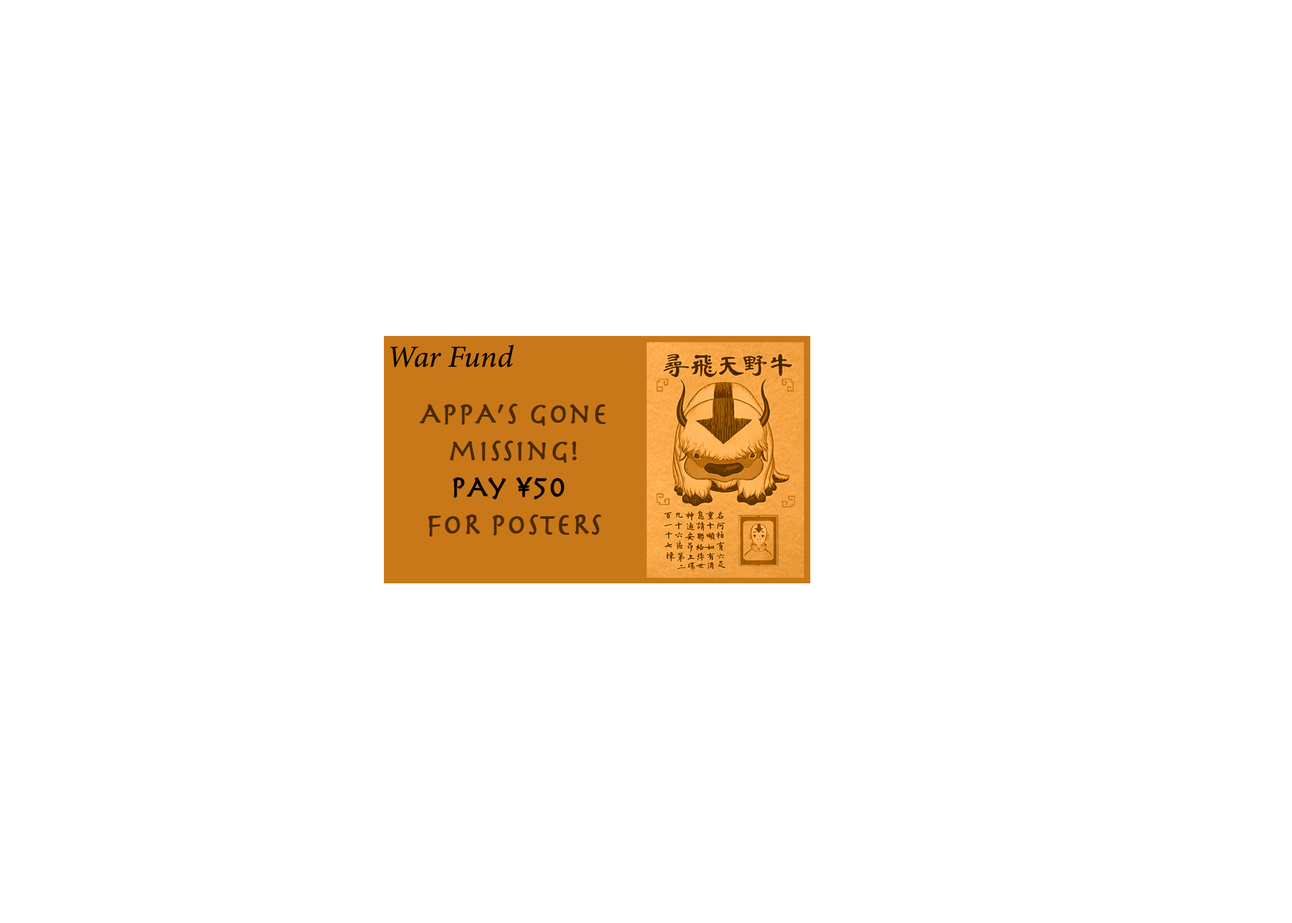
<style>
.page{position:relative;width:1292px;height:923px;background:#ffffff}
.page>*{position:absolute;margin:0}
.t1{font:30.8px "MinionConceptItalic-MediumItalic";color:#000000;font-weight:bold}
.t2{font:30.8px "Herculanum";color:#4d310e;font-weight:bold}
.t3{font:30.8px "Herculanum";color:#000000;font-weight:bold}
</style>
<div class="page">
<p class="t1" style="left:390px;top:345px;width:124px;height:22px">War Fund</p>
<p class="t2" style="left:420px;top:404px;width:186px;height:133px;text-align:center">AppA’s gone<br>missing!<br> <br>foR posteRs</p>
<p class="t3" style="left:453px;top:477px;width:112px;height:23px"><span class="t2"> <br> <br></span>pAy ¥50</p>
</div>
